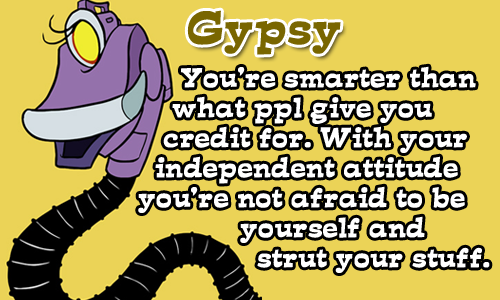
<style>
.page{position:relative;width:500px;height:300px;background:#ebd357}
.page>*{position:absolute;margin:0}
.t1{font:41.7px "d......";color:#796600;font-weight:bold}
.t2{font:25px "d......";color:#ffffff;font-weight:bold}
</style>
<div class="page">
<p class="t1" style="left:187px;top:10px;width:154px;height:45px">Gypsy</p>
<p class="t2" style="left:138px;top:66px;width:352px;height:207px">You’re smarter than <br>     what ppl give you <br>    credit for. With your <br>   independent attitude <br> you’re not afraid to be <br>             yourself and <br>               strut your stuff.</p>
</div>
